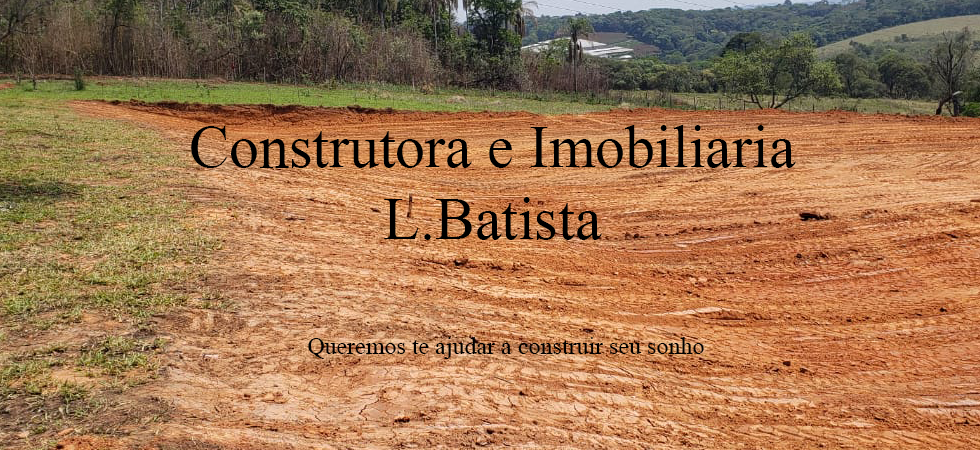
<style>
.page{position:relative;width:980px;height:450px}
.page>*{position:absolute;margin:0}
.t1{font:60px "MongolianBaiti";color:#000000}
.t2{font:24px "MongolianBaiti";color:#000000}
</style>
<div class="page">
<p class="t1" style="left:191px;top:125px;width:605px;height:115px;text-align:center">Construtora e Imobiliaria<br>L.Batista</p>
<p class="t2" style="left:308px;top:337px;width:396px;height:22px">Queremos te ajudar a construir seu sonho</p>
</div>
